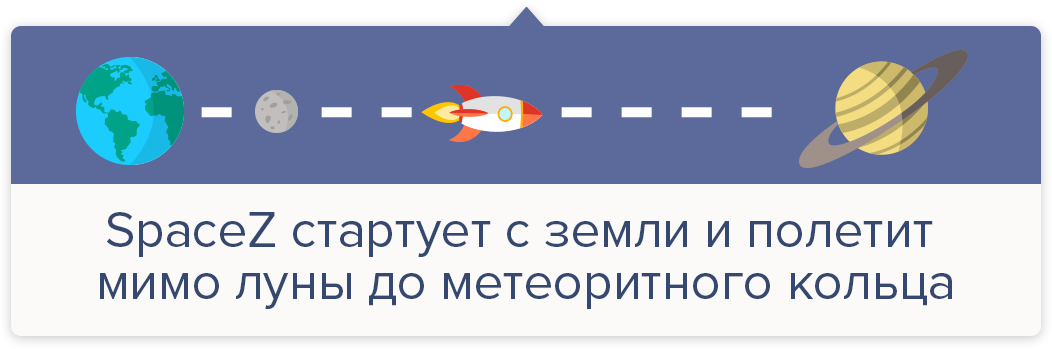
<style>
.page{position:relative;width:1052px;height:349px;background:#fbfaf8}
.page>*{position:absolute;margin:0}
.t1{font:52px/52px "ProximaNova-Regular";color:#344870}
</style>
<div class="page">
<p class="t1" style="left:100px;top:212px;width:852px;height:97px;text-align:center">SpaceZ стартует с земли и полетит <br>мимо луны до метеоритного кольца</p>
</div>
